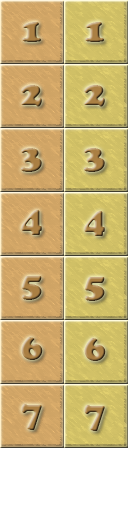
<style>
.page{position:relative;width:128px;height:512px}
.page>*{position:absolute;margin:0}
.t1{font:36px "CooperBlack"}
</style>
<div class="page">
<p class="t1" style="left:22px;top:22px;width:19px;height:20px">1</p>
<p class="t1" style="left:85px;top:22px;width:19px;height:20px">1</p>
<p class="t1" style="left:21px;top:85px;width:21px;height:22px">2</p>
<p class="t1" style="left:84px;top:85px;width:21px;height:22px">2</p>
<p class="t1" style="left:21px;top:148px;width:21px;height:24px">3</p>
<p class="t1" style="left:84px;top:148px;width:21px;height:24px">3</p>
<p class="t1" style="left:21px;top:210px;width:21px;height:25px">4</p>
<p class="t1" style="left:84px;top:211px;width:21px;height:25px">4</p>
<p class="t1" style="left:22px;top:276px;width:20px;height:24px">5</p>
<p class="t1" style="left:85px;top:277px;width:20px;height:24px">5</p>
<p class="t1" style="left:21px;top:337px;width:22px;height:23px">6</p>
<p class="t1" style="left:84px;top:338px;width:22px;height:23px">6</p>
<p class="t1" style="left:21px;top:404px;width:21px;height:26px">7</p>
<p class="t1" style="left:84px;top:405px;width:21px;height:26px">7</p>
</div>
